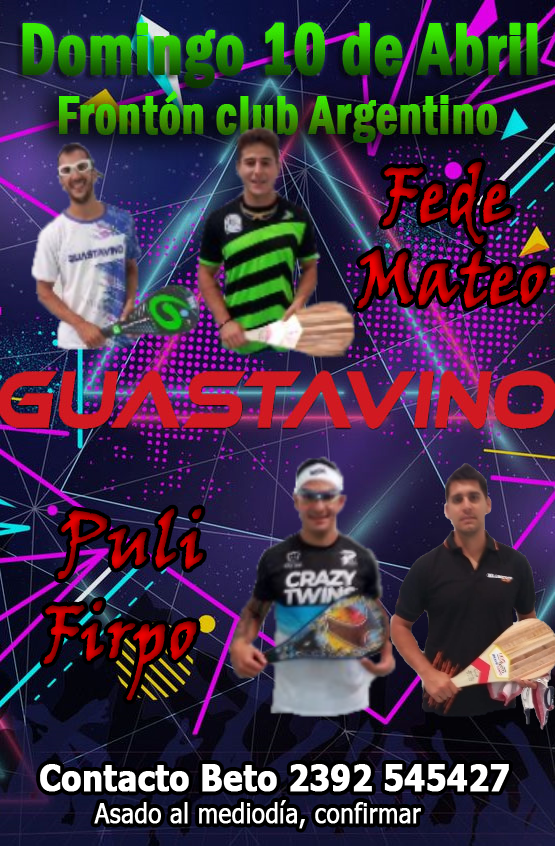
<style>
.page{position:relative;width:555px;height:846px}
.page>*{position:absolute;margin:0}
.t1{font:74.9px "VinerHandITC";font-weight:bold;scale:0.85 1}
.t2{font:37.4px "Tahoma-Bold";color:#ffffff;font-weight:bold;scale:0.85 1}
.t3{font:28.1px "Tahoma";color:#ffffff;font-weight:bold;scale:0.85 1}
</style>
<div class="page">
<p class="t1" style="left:382px;top:162px;width:129px;height:82px">Fede</p>
<p class="t1" style="left:357px;top:249px;width:190px;height:60px">Mateo</p>
<p class="t1" style="left:57px;top:508px;width:146px;height:71px">Puli</p>
<p class="t1" style="left:43px;top:600px;width:154px;height:101px">Firpo</p>
<p class="t2" style="left:40px;top:764px;width:469px;height:28px">Contacto Beto 2392 545427</p>
<p class="t3" style="left:94px;top:800px;width:327px;height:29px">Asado al mediodía, confirmar</p>
</div>
